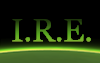
<style>
.page{position:relative;width:100px;height:63px;background:#000000}
.page>*{position:absolute;margin:0}
.t1{font:32px "Vani"}
.t2{font:13.3px "ArialMT"}
</style>
<div class="page">
<p class="t1" style="left:12px;top:19px;width:79px;height:23px"><span class="t2"><br><br></span>.I.R.E</p>
</div>
